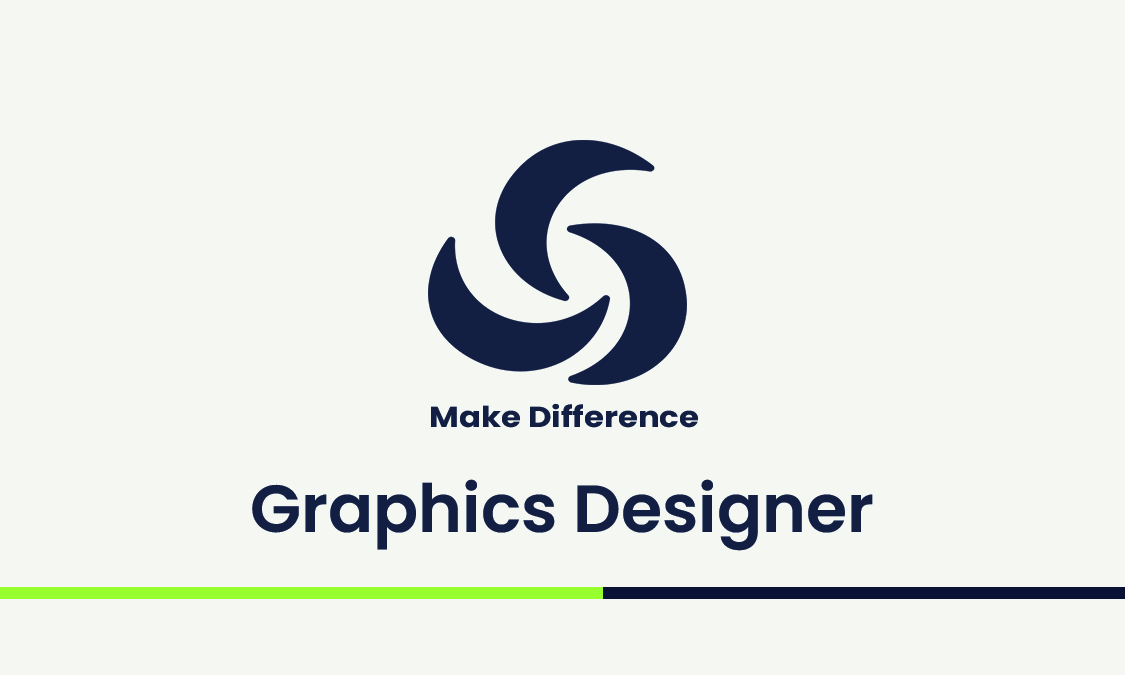
<style>
.page{position:relative;width:1125px;height:675px;background:#f4f7f2}
.page>*{position:absolute;margin:0}
.t1{font:28.9px "Poppins-Bold";color:#121f43;scale:1.12 1}
.t2{font:66.7px "Poppins-SemiBold";color:#121f43}
</style>
<div class="page">
<p class="t1" style="left:431px;top:403px;width:267px;height:25px">Make Difference</p>
<p class="t2" style="left:252px;top:479px;width:621px;height:72px">Graphics Designer</p>
</div>
